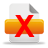
<style>
.page{position:relative;width:48px;height:48px;background:#ffffff}
.page>*{position:absolute;margin:0}
.t1{font:30px "Arial-BoldMT";color:#ff0000}
</style>
<div class="page">
<p class="t1" style="left:14px;top:15px;width:21px;height:22px">X</p>
</div>
